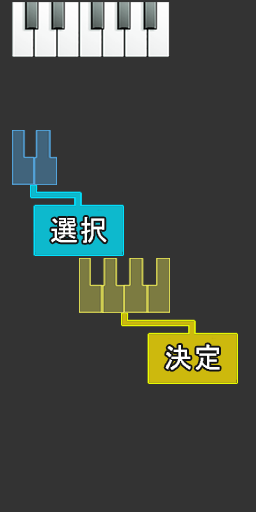
<style>
.page{position:relative;width:256px;height:512px;background:#333333}
.page>*{position:absolute;margin:0}
.t1{font:30px "System";letter-spacing:0.05em;color:#fefefe}
</style>
<div class="page">
<p class="t1" style="left:51px;top:217px;width:56px;height:26px">選択</p>
<p class="t1" style="left:165px;top:344px;width:55px;height:26px">決定</p>
</div>
